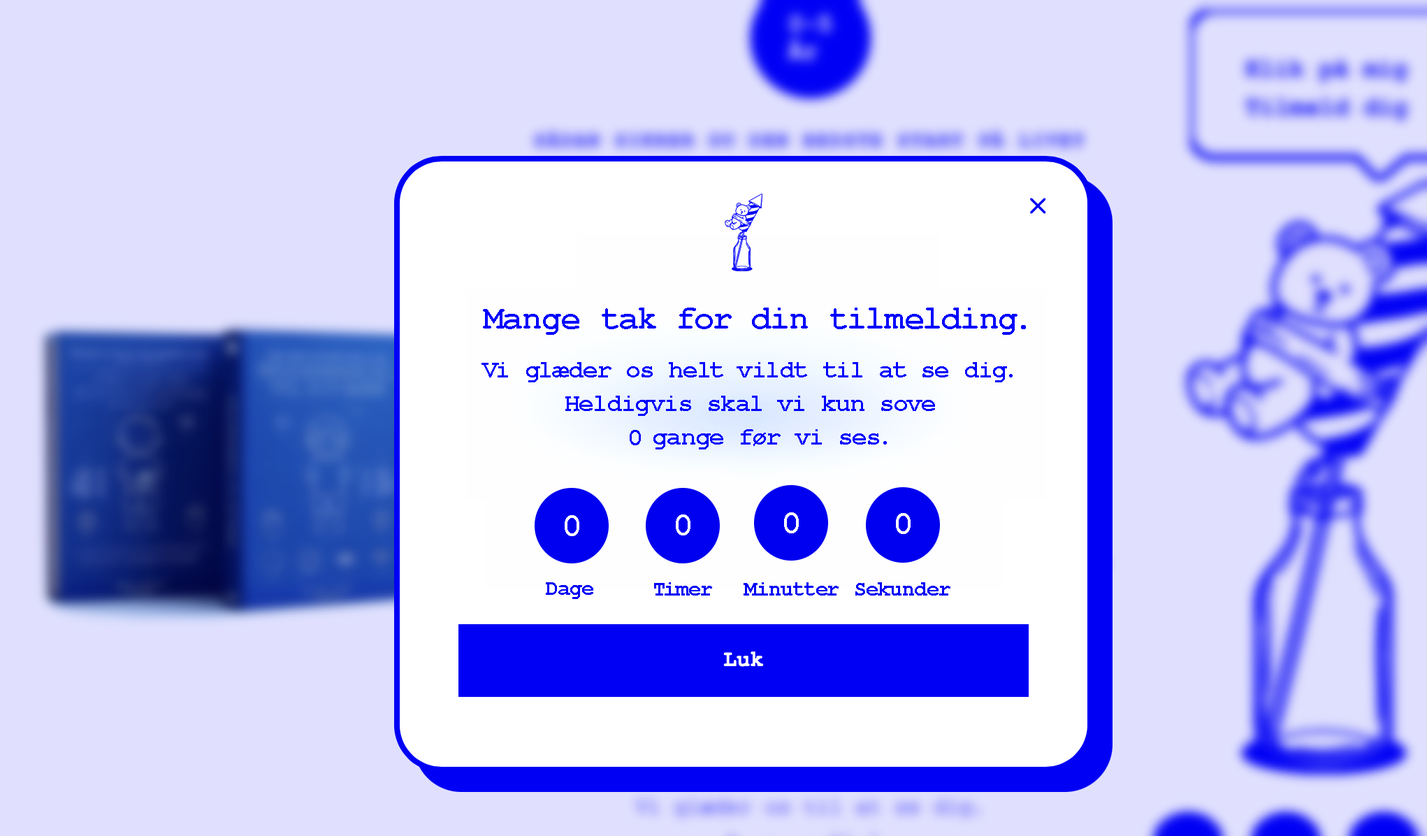
<style>
.page{position:relative;width:1427px;height:836px;background:#e0e0fe}
.page>*{position:absolute;margin:0}
.t1{font:33.5px "CourierNewPS-BoldMT";letter-spacing:-0.025em;color:#0000ff}
.t2{font:25.2px/33.5px "CourierNewPS-BoldMT";letter-spacing:-0.025em;color:#0000ff}
.t3{font:25.2px "CourierNewPS-BoldMT";letter-spacing:-0.025em;color:#0000ff}
.t4{font:33.5px "CourierNewPS-BoldMT";letter-spacing:-0.025em;color:#ffffff}
.t5{font:21px "CourierNewPS-BoldMT";letter-spacing:-0.025em;color:#0000f5}
</style>
<div class="page">
<p class="t1" style="left:483px;top:307px;width:543px;height:28px">Mange tak for din tilmelding.</p>
<p class="t2" style="left:481px;top:362px;width:531px;height:87px;text-align:center">Vi glæder os helt vildt til at se dig.<br>Heldigvis skal vi kun sove<br>   gange før vi ses.</p>
<p class="t3" style="left:630px;top:430px;width:11px;height:15px">0</p>
<p class="t4" style="left:565px;top:515px;width:14px;height:21px">0</p>
<p class="t4" style="left:676px;top:514px;width:14px;height:21px">0</p>
<p class="t4" style="left:784px;top:512px;width:15px;height:21px">0</p>
<p class="t4" style="left:896px;top:513px;width:14px;height:21px">0</p>
<p class="t5" style="left:546px;top:582px;width:47px;height:17px">Dage</p>
<p class="t5" style="left:654px;top:582px;width:58px;height:13px">Timer</p>
<p class="t5" style="left:743px;top:582px;width:96px;height:13px">Minutter</p>
<p class="t5" style="left:855px;top:582px;width:95px;height:13px">Sekunder</p>
</div>
